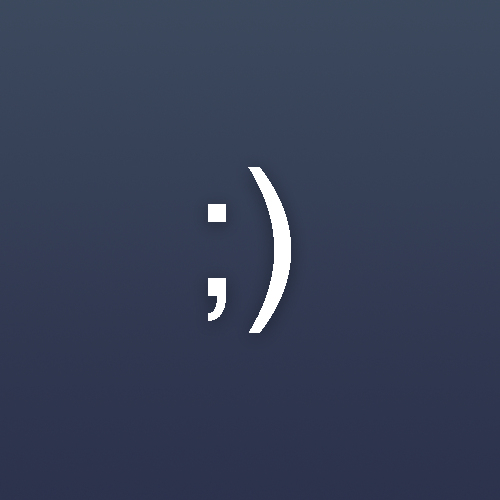
<style>
.page{position:relative;width:500px;height:500px}
.page>*{position:absolute;margin:0}
.t1{font:178.2px "MicrosoftSansSerif";color:#ffffff}
</style>
<div class="page">
<p class="t1" style="left:208px;top:167px;width:83px;height:166px">;)</p>
</div>
